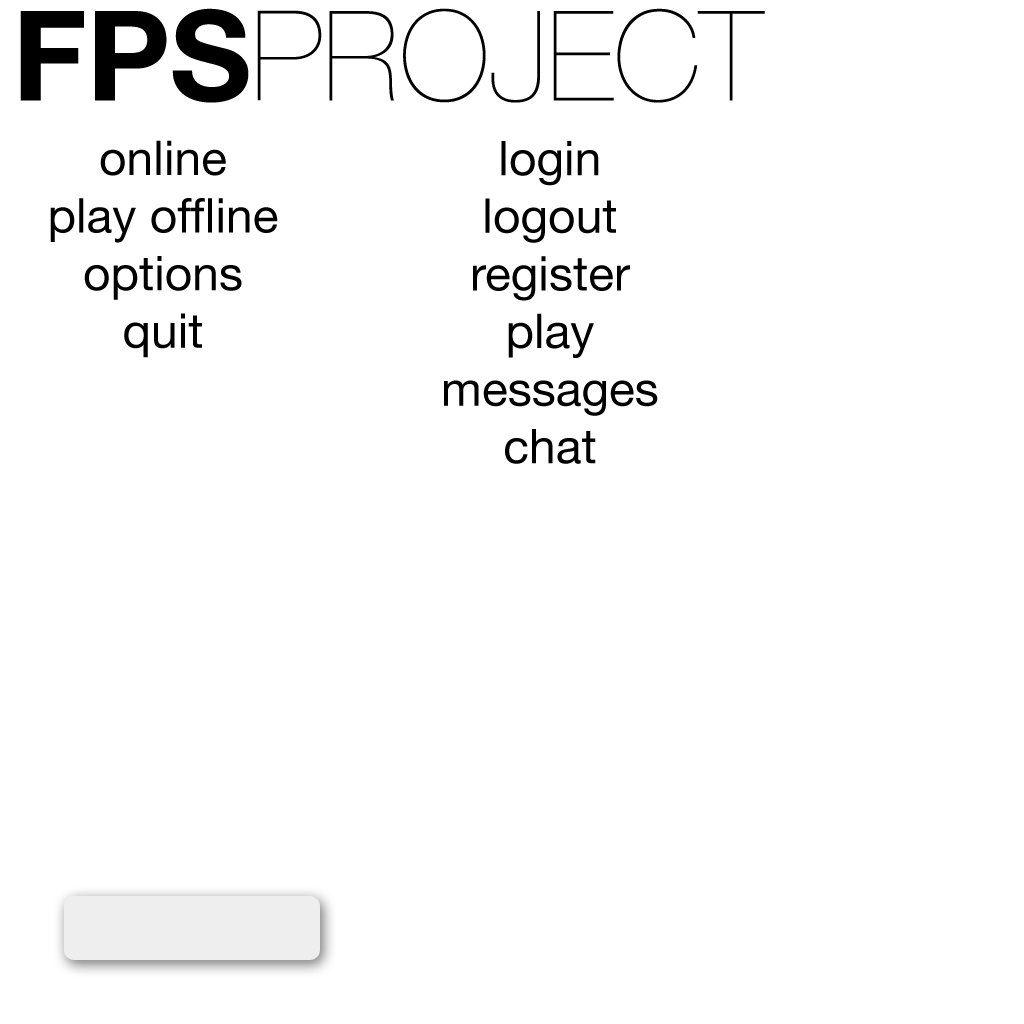
<style>
.page{position:relative;width:1024px;height:1024px;background:#ffffff}
.page>*{position:absolute;margin:0}
.t1{font:125px "HelveticaNeue-UltraLight";color:#000000}
.t2{font:125px "HelveticaNeue-Bold";color:#000000}
.t3{font:48px "HelveticaNeue";color:#000000}
</style>
<div class="page">
<p class="t1" style="left:20px;top:8px;width:745px;height:95px"><span class="t2">FPS</span>PROJECT</p>
<p class="t3" style="left:50px;top:140px;width:228px;height:218px;text-align:center">online<br>play offline<br>options<br>quit</p>
<p class="t3" style="left:444px;top:141px;width:214px;height:323px;text-align:center">login<br>logout<br>register<br>play<br>messages<br>chat</p>
</div>
